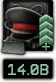
<style>
.page{position:relative;width:56px;height:82px}
.page>*{position:absolute;margin:0}
.t1{font:14px "Retron2000";letter-spacing:0.02em;color:#98bba6}
</style>
<div class="page">
<p class="t1" style="left:8px;top:64px;width:41px;height:11px">14.0B</p>
</div>
